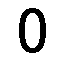
<style>
.page{position:relative;width:64px;height:64px;background:#ffffff}
.page>*{position:absolute;margin:0}
.t1{font:60px "MicrosoftSansSerif";color:#000000}
</style>
<div class="page">
<p class="t1" style="left:19px;top:8px;width:27px;height:45px">0</p>
</div>
